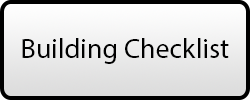
<style>
.page{position:relative;width:250px;height:100px}
.page>*{position:absolute;margin:0}
.t1{font:28px "MyriadPro-Regular";color:#000000}
</style>
<div class="page">
<p class="t1" style="left:22px;top:38px;width:207px;height:26px">Building Checklist</p>
</div>
